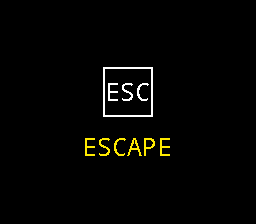
<style>
.page{position:relative;width:256px;height:224px;background:#000000}
.page>*{position:absolute;margin:0}
.t1{font:25px "NotoMono";color:#ffffff}
.t2{font:25px "NotoMono";color:#ffea00}
</style>
<div class="page">
<p class="t1" style="left:108px;top:83px;width:41px;height:18px">ESC</p>
<p class="t2" style="left:85px;top:138px;width:85px;height:18px">ESCAPE</p>
</div>
